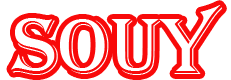
<style>
.page{position:relative;width:231px;height:80px;background:#ffffff}
.page>*{position:absolute;margin:0}
.t1{font:82.9px "Algerian";color:#ffffff}
</style>
<div class="page">
<p class="t1" style="left:11px;top:5px;width:211px;height:70px">SOUY</p>
</div>
